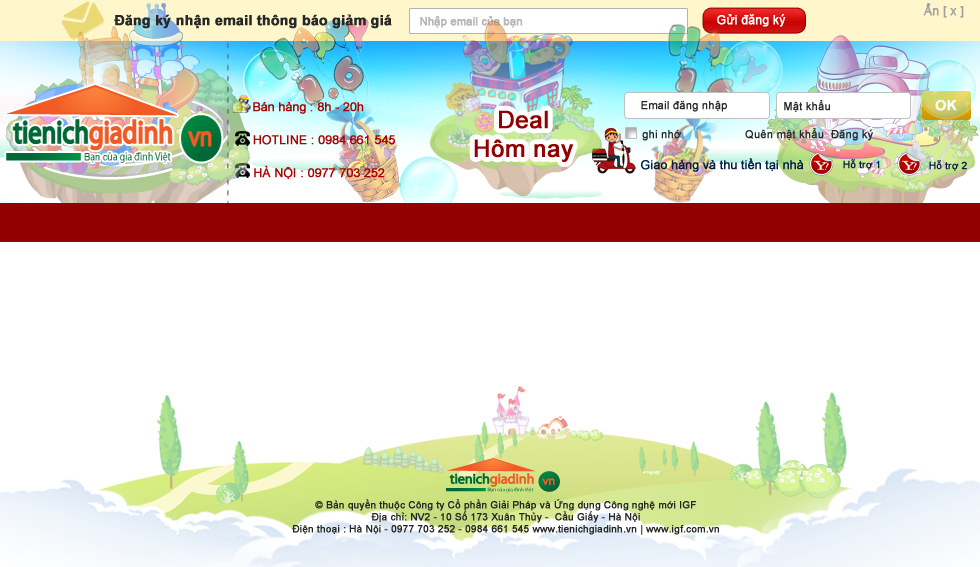
<style>
.page{position:relative;width:980px;height:567px;background:#ffffff}
.page>*{position:absolute;margin:0}
.t1{font:12px "ArialMT";color:#a0a0a0;font-weight:bold}
.t2{font:14px "Arial-BoldMT";color:#272727;font-weight:bold}
.t3{font:11px "ArialMT";color:#b7b7b7;font-weight:bold}
.t4{font:12px "ArialMT";color:#ffffff;font-weight:bold}
.t5{font:11px "ArialMT";color:#292929;font-weight:bold}
.t6{font:14px "Arial-BoldMT";color:#ffffff;font-weight:bold}
.t7{font:24px "ArialMT";color:#930000;font-weight:bold}
.t8{font:12px "ArialMT";color:#002048;font-weight:bold}
.t9{font:10px "ArialMT";color:#002048;font-weight:bold}
.t10{font:10px "ArialMT";color:#262626;font-weight:bold}
</style>
<div class="page">
<p class="t1" style="left:923px;top:3px;width:41px;height:15px">Ẩn [ x ]</p>
<p class="t2" style="left:114px;top:14px;width:278px;height:15px">Đăng ký nhận email thông báo giảm giá</p>
<p class="t3" style="left:420px;top:16px;width:103px;height:12px">Nhập email của bạn</p>
<p class="t4" style="left:717px;top:14px;width:69px;height:13px">Gửi đăng ký</p>
<p class="t5" style="left:641px;top:100px;width:86px;height:12px">Email đăng nhập</p>
<p class="t5" style="left:784px;top:100px;width:46px;height:12px">Mật khẩu</p>
<p class="t6" style="left:935px;top:99px;width:22px;height:12px">OK</p>
<p class="t7" style="left:474px;top:110px;width:99px;height:52px;text-align:center">Deal<br>Hôm nay</p>
<p class="t5" style="left:642px;top:128px;width:231px;height:13px">ghi nhớ                   Quên mật khẩu  Đăng ký</p>
<p class="t8" style="left:641px;top:158px;width:163px;height:14px">Giao hàng và thu tiền tại nhà</p>
<p class="t9" style="left:843px;top:159px;width:37px;height:11px">Hỗ trợ 1</p>
<p class="t9" style="left:929px;top:160px;width:38px;height:11px">Hỗ trợ 2</p>
<p class="t10" style="left:292px;top:499px;width:427px;height:36px;text-align:center">© Bản quyền thuộc Công ty Cổ phần Giải Pháp và Ứng dụng Công nghệ mới IGF<br>Địa chỉ: NV2 - 10 Số 173 Xuân Thủy -  Cầu Giấy - Hà Nội<br>Điện thoại : Hà Nội - 0977 703 252 - 0984 661 545 www.tienichgiadinh.vn | www.igf.com.vn</p>
</div>
